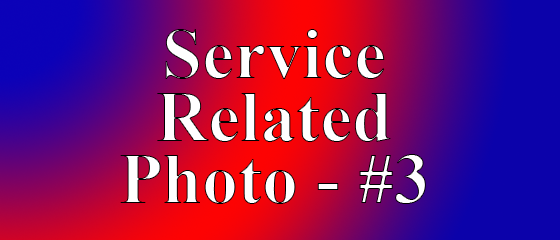
<style>
.page{position:relative;width:560px;height:240px}
.page>*{position:absolute;margin:0}
.t1{font:71.7px/62.5px "TimesNewRomanPS-BoldMT";color:#ffffff}
</style>
<div class="page">
<p class="t1" style="left:120px;top:29px;width:306px;height:175px;text-align:center">Service<br>Related<br>Photo - #3</p>
</div>
